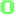
<style>
.page{position:relative;width:15px;height:14px;background:#73ff68}
.page>*{position:absolute;margin:0}
.t1{font:48px "FinalFantasyIVSNES";letter-spacing:0.015em;color:#73ff68}
</style>
<div class="page">
<p class="t1" style="left:0px;top:0px;width:15px;height:14px">0</p>
</div>
